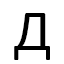
<style>
.page{position:relative;width:64px;height:64px;background:#ffffff}
.page>*{position:absolute;margin:0}
.t1{font:58.3px "Calibri";color:#000000}
</style>
<div class="page">
<p class="t1" style="left:14px;top:13px;width:36px;height:47px">Д</p>
</div>
